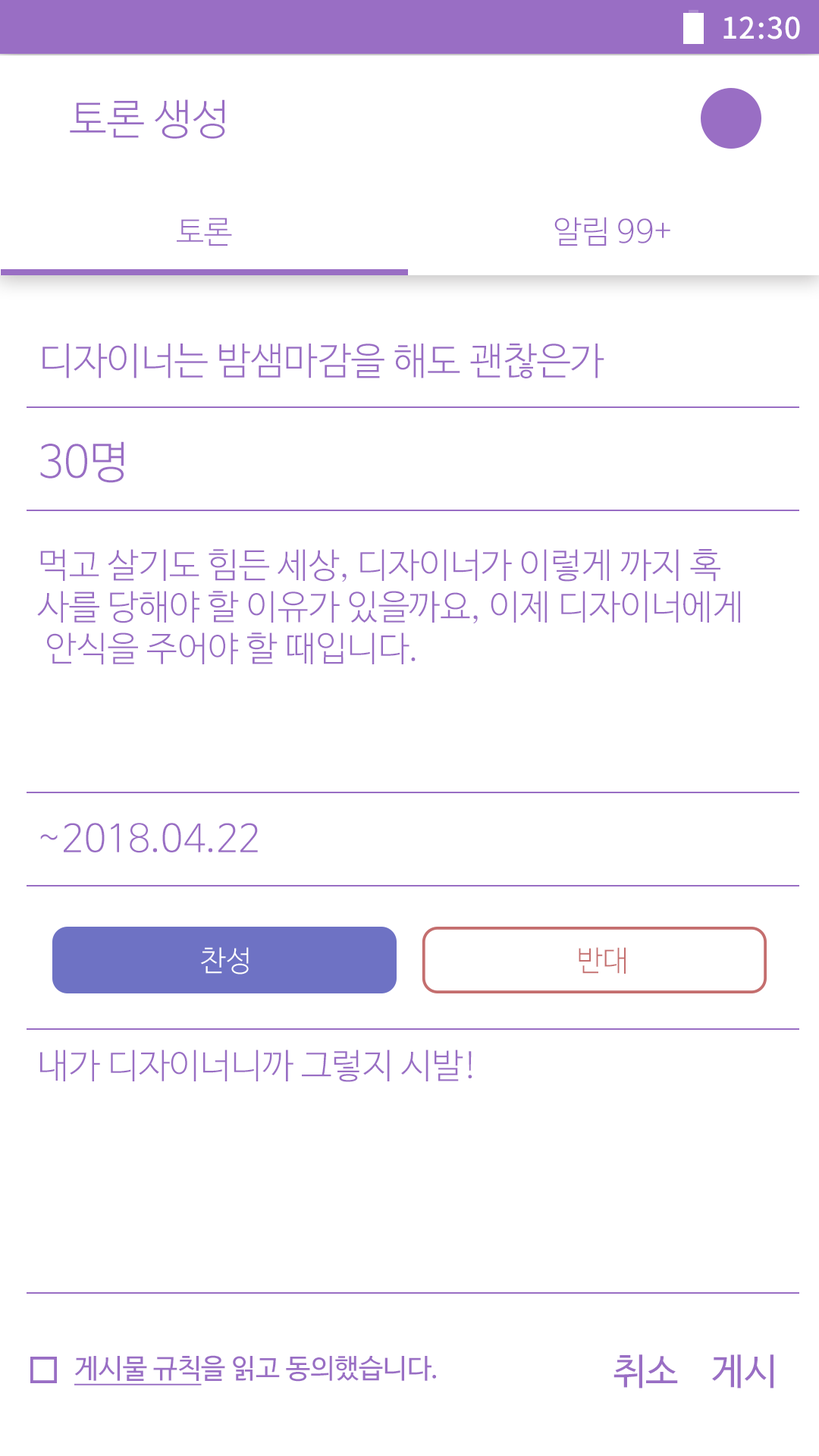
<style>
.page{position:relative;width:819px;height:1456px;background:#ffffff}
.page>*{position:absolute;margin:0}
.t1{font:29.6px "NotoSansCJKkr-Medium";letter-spacing:0.029em;color:#ffffff}
.t2{font:42.3px "NanumBarunGothicLight";color:#996ec4}
.t3{font:31.6px "NanumBarunGothicLight";color:#996ec4}
.t4{font:37.9px "NanumBarunGothicLight";color:#996ec4}
.t5{font:44.2px "NanumBarunGothicLight";color:#996ec4}
.t6{font:34.8px "NanumBarunGothicLight";color:#996ec4}
.t7{font:28.8px "NanumBarunGothicLight";color:#ffffff}
.t8{font:28.8px "NanumBarunGothicLight";color:#c46e6e}
.t9{font:27.1px "NanumBarunGothic";color:#996ec4}
.t10{font:27.1px "NanumBarunGothic";color:#996ec4;text-decoration:underline}
.t11{font:36.9px "NanumBarunGothic";color:#996ec4}
</style>
<div class="page">
<p class="t1" style="left:723px;top:16px;width:77px;height:23px">12:30</p>
<p class="t2" style="left:70px;top:99px;width:155px;height:40px">토론 생성</p>
<p class="t3" style="left:177px;top:218px;width:55px;height:28px">토론</p>
<p class="t3" style="left:554px;top:217px;width:116px;height:29px">알림 99+</p>
<p class="t4" style="left:42px;top:344px;width:562px;height:34px">디자이너는 밤샘마감을 해도 괜찮은가</p>
<p class="t5" style="left:40px;top:441px;width:84px;height:42px">30명</p>
<p class="t6" style="left:37px;top:549px;width:703px;height:116px">먹고 살기도 힘든 세상, 디자이너가 이렇게 까지 혹<br>사를 당해야 할 이유가 있을까요, 이제 디자이너에게<br> 안식을 주어야 할 때입니다.</p>
<p class="t4" style="left:40px;top:823px;width:218px;height:30px">~2018.04.22</p>
<p class="t7" style="left:201px;top:947px;width:48px;height:27px">찬성</p>
<p class="t8" style="left:579px;top:947px;width:47px;height:27px">반대</p>
<p class="t6" style="left:40px;top:1050px;width:432px;height:32px">내가 디자이너니까 그렇지 시발!</p>
<p class="t9" style="left:74px;top:1355px;width:362px;height:30px"><span class="t10">게시물 규칙</span>을 읽고 동의했습니다.</p>
<p class="t11" style="left:613px;top:1354px;width:160px;height:34px">취소    게시</p>
</div>
